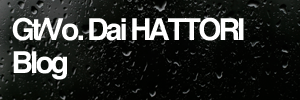
<style>
.page{position:relative;width:300px;height:100px}
.page>*{position:absolute;margin:0}
.t1{font:30px/36px "Helvetica-Bold";letter-spacing:-0.1em;color:#ffffff}
</style>
<div class="page">
<p class="t1" style="left:12px;top:17px;width:232px;height:63px">Gt/Vo. Dai HATTORI<br>Blog</p>
</div>
